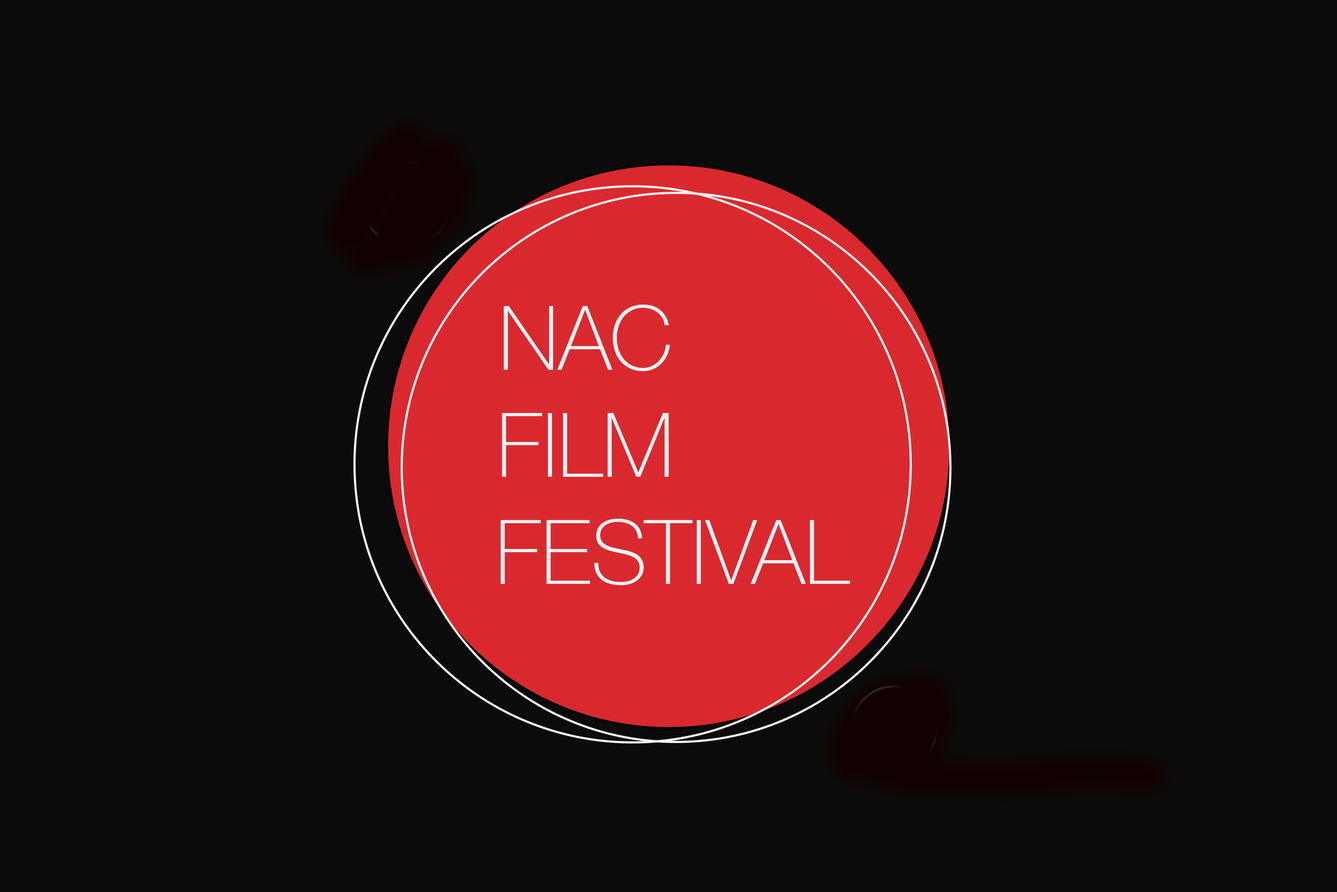
<style>
.page{position:relative;width:1337px;height:892px;background:#0c0b0b}
.page>*{position:absolute;margin:0}
.t1{font:89.2px "HelveticaNeue-Thin";color:#f7f2f1}
</style>
<div class="page">
<p class="t1" style="left:501px;top:304px;width:350px;height:281px;text-align:center">NAC<br>FILM<br>       FESTIVAL</p>
</div>
